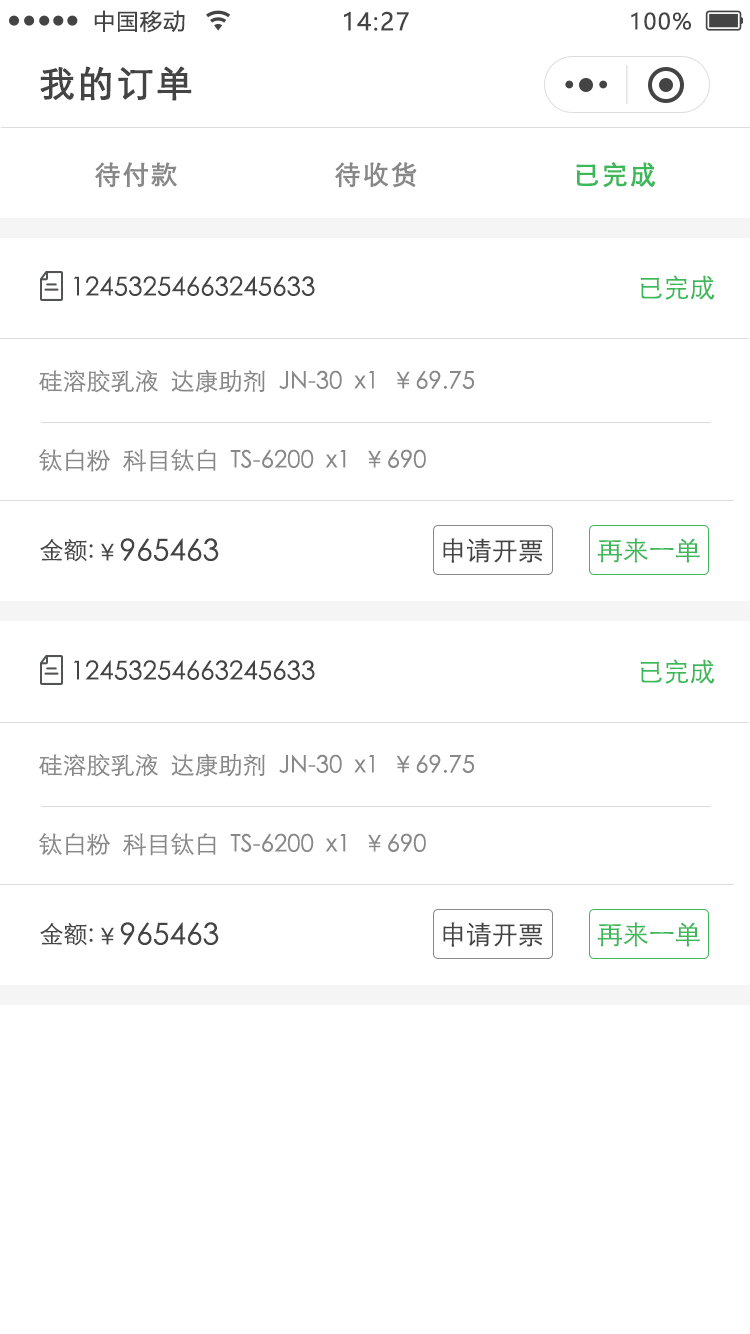
<style>
.page{position:relative;width:750px;height:1334px;background:#ffffff}
.page>*{position:absolute;margin:0}
.t1{font:22px "MicrosoftYaHei";letter-spacing:0.06em;color:#444444}
.t2{font:24px "MicrosoftYaHei";letter-spacing:0.06em;color:#444444}
.t3{font:36px "STXihei";letter-spacing:0.06em;color:#444444;font-weight:bold}
.t4{font:26px "STXihei";letter-spacing:0.06em;color:#888888;font-weight:bold}
.t5{font:26px "STXihei";letter-spacing:0.06em;color:#3db858;font-weight:bold}
.t6{font:26px "STXihei";color:#444444}
.t7{font:26px "STXihei";color:#3db858}
.t8{font:24px "STXihei";color:#888888}
.t9{font:24px "STXihei";color:#444444}
.t10{font:30px "STXihei";color:#444444}
</style>
<div class="page">
<p class="t1" style="left:94px;top:10px;width:91px;height:23px">中国移动</p>
<p class="t2" style="left:344px;top:11px;width:65px;height:20px">14:27</p>
<p class="t1" style="left:631px;top:12px;width:60px;height:18px">100%</p>
<p class="t3" style="left:40px;top:66px;width:152px;height:35px">我的订单</p>
<p class="t4" style="left:95px;top:162px;width:82px;height:26px">待付款</p>
<p class="t4" style="left:335px;top:162px;width:82px;height:26px">待收货</p>
<p class="t5" style="left:576px;top:162px;width:80px;height:25px">已完成</p>
<p class="t6" style="left:74px;top:276px;width:241px;height:20px">12453254663245633</p>
<p class="t7" style="left:640px;top:275px;width:75px;height:25px">已完成</p>
<p class="t8" style="left:39px;top:369px;width:435px;height:24px">硅溶胶乳液  达康助剂  JN-30  x1  ￥69.75</p>
<p class="t8" style="left:39px;top:449px;width:387px;height:23px">钛白粉  科目钛白  TS-6200  x1  ￥690</p>
<p class="t9" style="left:40px;top:538px;width:53px;height:24px">金额:</p>
<p class="t10" style="left:101px;top:538px;width:118px;height:23px"><span class="t9">￥</span>965463</p>
<p class="t6" style="left:443px;top:538px;width:99px;height:25px">申请开票</p>
<p class="t7" style="left:597px;top:538px;width:103px;height:25px">再来一单</p>
<p class="t6" style="left:74px;top:660px;width:241px;height:20px">12453254663245633</p>
<p class="t7" style="left:640px;top:659px;width:75px;height:25px">已完成</p>
<p class="t8" style="left:39px;top:753px;width:435px;height:24px">硅溶胶乳液  达康助剂  JN-30  x1  ￥69.75</p>
<p class="t8" style="left:39px;top:833px;width:387px;height:23px">钛白粉  科目钛白  TS-6200  x1  ￥690</p>
<p class="t9" style="left:40px;top:922px;width:53px;height:24px">金额:</p>
<p class="t10" style="left:101px;top:922px;width:118px;height:23px"><span class="t9">￥</span>965463</p>
<p class="t6" style="left:443px;top:922px;width:99px;height:25px">申请开票</p>
<p class="t7" style="left:597px;top:922px;width:103px;height:25px">再来一单</p>
</div>
